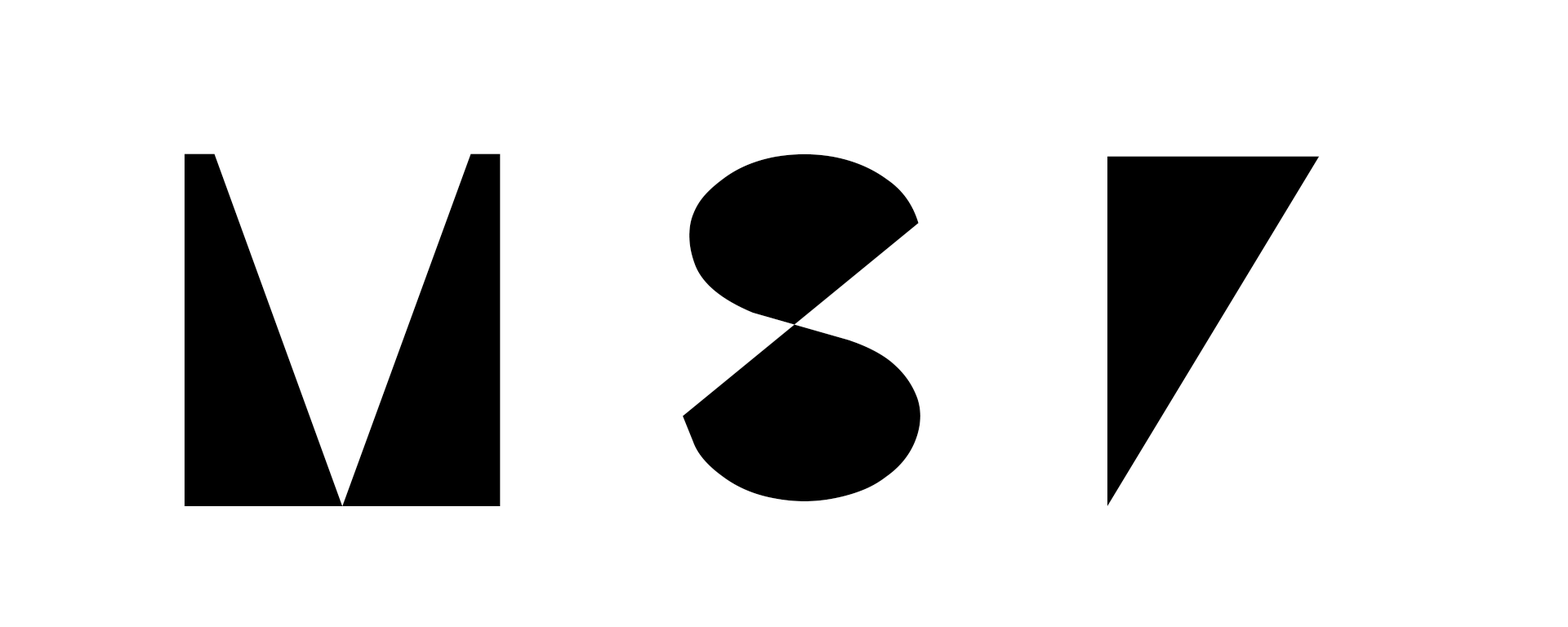
<style>
.page{position:relative;width:1568px;height:627px;background:#ffffff}
.page>*{position:absolute;margin:0}
.t1{font:490px "OLFSimpleSansOC-Regular";color:#000000}
</style>
<div class="page">
<p class="t1" style="left:185px;top:154px;width:1135px;height:352px">M.S.F.</p>
</div>
